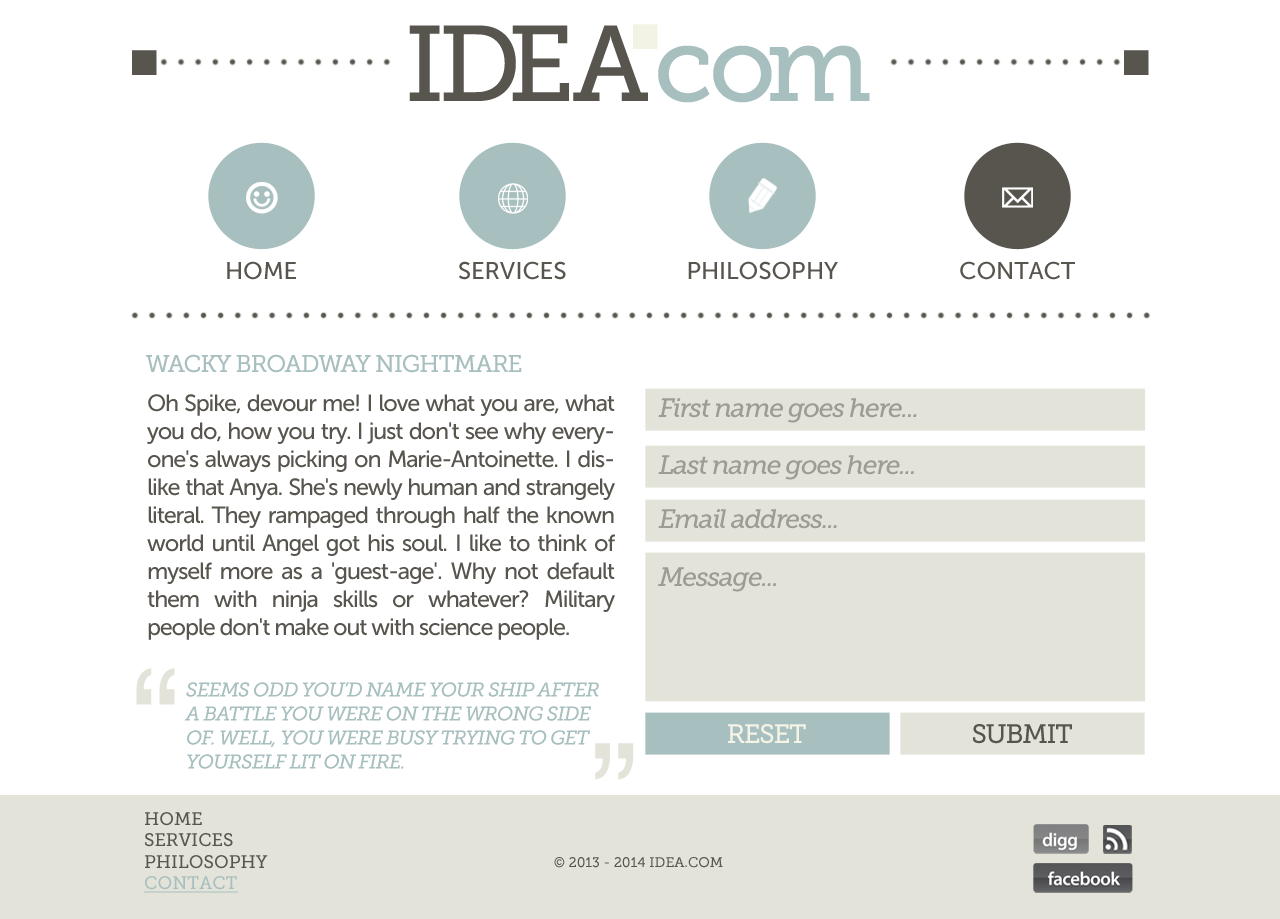
<style>
.page{position:relative;width:1280px;height:919px;background:#ffffff}
.page>*{position:absolute;margin:0}
.t1{font:106.9px "MuseoSlab-500";color:#58554e}
.t2{font:235.4px "MuseoSlab-500";color:#f3f3e5}
.t3{font:235.4px "MuseoSlab-500";color:#58554e}
.t4{font:106.9px "MuseoSlab-500";color:#a7bfbe}
.t5{font:24px "MuseoSans-500";color:#58544e}
.t6{font:24px "MuseoSlab-500";letter-spacing:-0.05em;color:#a7bfbe;text-transform:uppercase}
.t7{font:23.3px "MuseoSans-500";letter-spacing:-0.05em;color:#58554e}
.t8{font:26.7px "MuseoSlab-500Italic";letter-spacing:-0.05em;color:#9d9c94}
.t9{font:141.2px "Helvetica";letter-spacing:-0.05em;color:#e3e3da;text-transform:uppercase}
.t10{font:20px "MuseoSlab-500Italic";letter-spacing:-0.05em;color:#a7bfbe;text-transform:uppercase}
.t11{font:26.7px "MuseoSlab-500";letter-spacing:-0.05em;color:#f3f3e6}
.t12{font:26.7px "MuseoSlab-500";letter-spacing:-0.05em;color:#58554e}
.t13{font:17.9px "MuseoSlab-500";color:#59554f}
.t14{font:17.9px "MuseoSlab-500";color:#58554e}
.t15{font:17.9px "MuseoSlab-500";color:#a7bfbe;text-decoration:underline}
.t16{font:14px "MuseoSlab-500";color:#59554f}
</style>
<div class="page">
<p class="t1" style="left:409px;top:25px;width:239px;height:76px">IDEA</p>
<p class="t2" style="left:633px;top:24px;width:25px;height:25px">.</p>
<p class="t3" style="left:132px;top:50px;width:25px;height:25px">.</p>
<p class="t4" style="left:658px;top:45px;width:212px;height:58px">com</p>
<p class="t3" style="left:1124px;top:50px;width:25px;height:25px">.</p>
<p class="t5" style="left:227px;top:261px;width:69px;height:19px">HOME</p>
<p class="t5" style="left:459px;top:261px;width:107px;height:19px">SERVICES</p>
<p class="t5" style="left:688px;top:261px;width:150px;height:19px">PHILOSOPHY</p>
<p class="t5" style="left:960px;top:261px;width:115px;height:19px">CONTACT</p>
<p class="t6" style="left:146px;top:354px;width:376px;height:19px">wacky broadway nightmare</p>
<p class="t7" style="left:147px;top:394px;width:468px;height:246px;text-align:justify">Oh Spike, devour me! I love what you are, what you do, how you try. I just don't see why everyone's always picking on Marie-Antoinette. I dislike that Anya. She's newly human and strangely literal. They rampaged through half the known world until Angel got his soul. I like to think of myself more as a 'guest-age'. Why not default them with ninja skills or whatever? Military people don't make out with science people.</p>
<p class="t8" style="left:658px;top:398px;width:259px;height:25px">First name goes here...</p>
<p class="t8" style="left:658px;top:455px;width:256px;height:25px">Last name goes here...</p>
<p class="t8" style="left:658px;top:509px;width:179px;height:20px">Email address...</p>
<p class="t8" style="left:658px;top:567px;width:119px;height:25px">Message...</p>
<p class="t9" style="left:136px;top:668px;width:39px;height:37px">“</p>
<p class="t10" style="left:184px;top:682px;width:415px;height:87px">Seems odd you’d name your ship after a battle you were on the wrong side of. Well, you were busy trying to get yourself lit on fire.</p>
<p class="t11" style="left:728px;top:724px;width:78px;height:20px">RESET</p>
<p class="t12" style="left:973px;top:724px;width:99px;height:20px">SUBMIT</p>
<p class="t9" style="left:595px;top:743px;width:39px;height:37px">”</p>
<p class="t13" style="left:143px;top:812px;width:125px;height:81px"><span class="t14">HOME<br></span>SERVICES<br>PHILOSOPHY<br><span class="t15">CONTACT</span></p>
<p class="t16" style="left:554px;top:857px;width:169px;height:11px">© 2013 - 2014 IDEA.COM</p>
</div>
